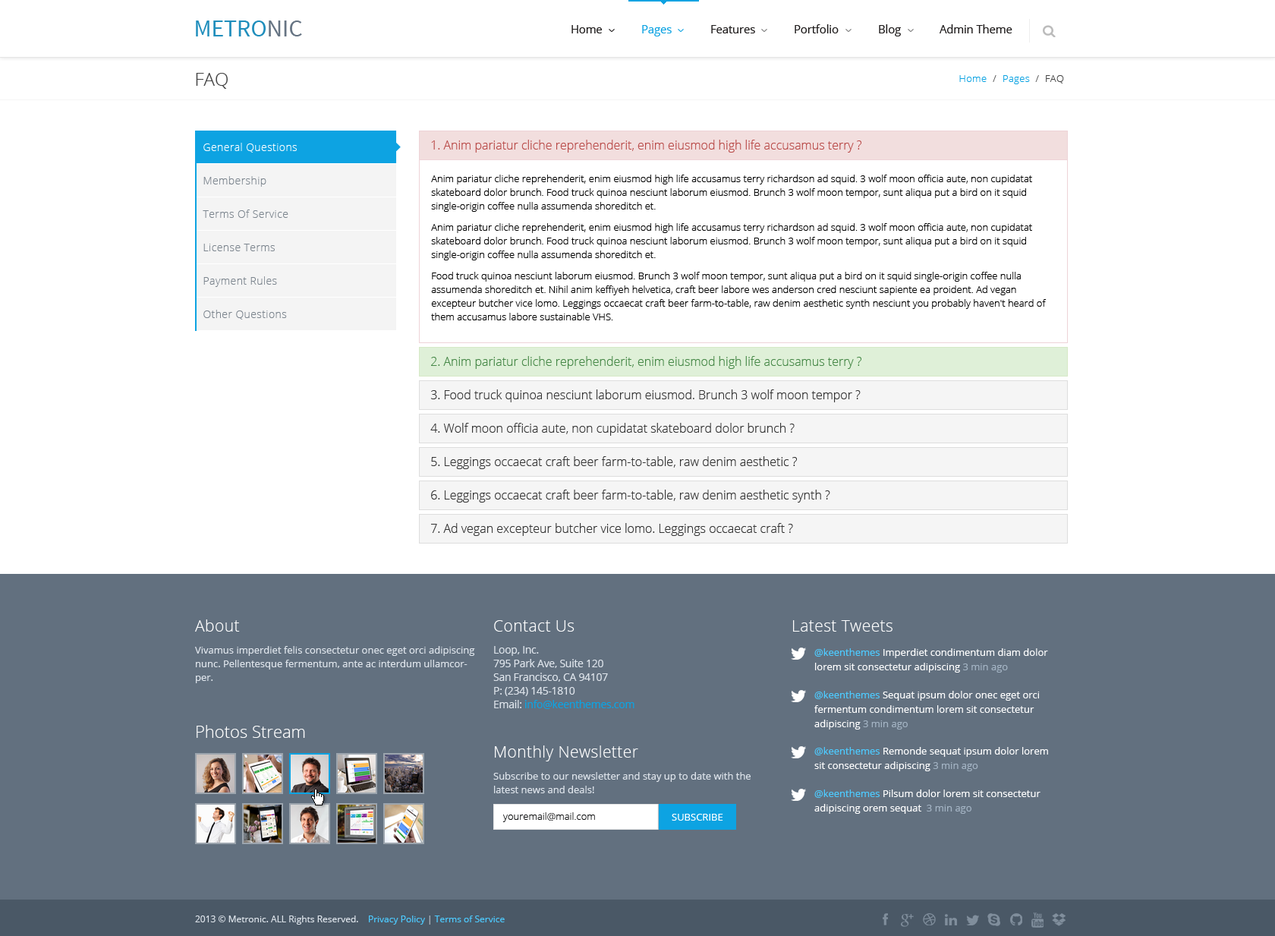
<style>
.page{position:relative;width:1275px;height:936px;background:#ffffff}
.page>*{position:absolute;margin:0}
.t1{font:24.2px "SourceSansPro-Regular";color:#208ebc;text-transform:uppercase}
.t2{font:24.2px "SourceSansPro-Regular";color:#667483;text-transform:uppercase}
.t3{font:11.1px "OpenSans";color:#1f1c1c}
.t4{font:11.1px "OpenSans";color:#0da3e2}
.t5{font:18.2px "OpenSans-Light";color:#444444}
.t6{font:9.9px "OpenSans-Light";letter-spacing:0.025em;color:#444444}
.t7{font:9.9px "OpenSans-Light";letter-spacing:0.025em;color:#0da3e2}
.t8{font:10.6px "OpenSans-Light";letter-spacing:0.03em;color:#ffffff}
.t9{font:12.1px "OpenSans-Light";color:#b94a48}
.t10{font:10.6px "OpenSans-Light";letter-spacing:0.03em;color:#7c858e}
.t11{font:9.9px/13.7px "OpenSans-Light";color:#000000}
.t12{font:9.9px/7.6px "OpenSans-Light";color:#000000}
.t13{font:12.1px "OpenSans-Light";color:#468847}
.t14{font:12.1px "OpenSans-Light";color:#333333}
.t15{font:15.9px "OpenSans-Light";letter-spacing:0.02em;color:#fefefe}
.t16{font:15.9px "OpenSans-Light";letter-spacing:0.02em;color:#ffffff}
.t17{font:9.9px/13.7px "OpenSans";color:#dee4eb}
.t18{font:10.6px/13.7px "OpenSans";letter-spacing:-0.02em;color:#dee4eb}
.t19{font:10.6px/13.7px "OpenSans";letter-spacing:-0.02em;color:#0da3e2}
.t20{font:9.9px/14.4px "OpenSans";color:#ffffff}
.t21{font:9.9px/14.4px "OpenSans";color:#4dcaff}
.t22{font:9.9px/14.4px "OpenSans";color:#a3b3c3}
.t23{font:16.7px "OpenSans-Light";color:#fefefe}
.t24{font:9.9px "OpenSans-Light";color:#121314}
.t25{font:9.9px "OpenSans";color:#ffffff}
.t26{font:9.1px "OpenSans";color:#dee4eb}
.t27{font:9.1px "OpenSans";color:#4dcaff}
.t28{font:9.1px "OpenSans";color:#b5bdc7}
</style>
<div class="page">
<p class="t1" style="left:196px;top:20px;width:106px;height:16px">Metro<span class="t2">nic</span></p>
<p class="t3" style="left:571px;top:25px;width:31px;height:8px">Home</p>
<p class="t4" style="left:642px;top:25px;width:29px;height:11px">Pages</p>
<p class="t3" style="left:711px;top:25px;width:44px;height:8px">Features</p>
<p class="t3" style="left:794px;top:24px;width:44px;height:9px">Portfolio</p>
<p class="t3" style="left:879px;top:24px;width:22px;height:12px">Blog</p>
<p class="t3" style="left:939px;top:24px;width:73px;height:9px">Admin Theme</p>
<p class="t5" style="left:196px;top:73px;width:32px;height:16px">FAQ</p>
<p class="t6" style="left:959px;top:75px;width:105px;height:9px"><span class="t7">Home  </span>/  <span class="t7">Pages</span>  /  FAQ</p>
<p class="t8" style="left:203px;top:143px;width:94px;height:10px">General Questions</p>
<p class="t9" style="left:431px;top:140px;width:430px;height:13px">1. Anim pariatur cliche reprehenderit, enim eiusmod high life accusamus terry ?</p>
<p class="t10" style="left:203px;top:176px;width:63px;height:11px">Membership</p>
<p class="t11" style="left:431px;top:175px;width:615px;height:145px">Anim pariatur cliche reprehenderit, enim eiusmod high life accusamus terry richardson ad squid. 3 wolf moon officia aute, non cupidatat skateboard dolor brunch. Food truck quinoa nesciunt laborum eiusmod. Brunch 3 wolf moon tempor, sunt aliqua put a bird on it squid single-origin coffee nulla assumenda shoreditch et.<br><br><span class="t12">Anim pariatur cliche reprehenderit, enim eiusmod high life accusamus terry richardson ad squid. 3 wolf moon officia aute, non cupidatat </span>skateboard dolor brunch. Food truck quinoa nesciunt laborum eiusmod. Brunch 3 wolf moon tempor, sunt aliqua put a bird on it squid single-origin coffee nulla assumenda shoreditch et.<br><br><span class="t12">Food truck quinoa nesciunt laborum eiusmod. Brunch 3 wolf moon tempor, sunt aliqua put a bird on it squid single-origin coffee nulla </span>assumenda shoreditch et. Nihil anim keffiyeh helvetica, craft beer labore wes anderson cred nesciunt sapiente ea proident. Ad vegan excepteur butcher vice lomo. Leggings occaecat craft beer farm-to-table, raw denim aesthetic synth nesciunt you probably haven't heard of them accusamus labore sustainable VHS.</p>
<p class="t10" style="left:203px;top:209px;width:85px;height:9px">Terms Of Service</p>
<p class="t10" style="left:203px;top:244px;width:72px;height:7px">License Terms</p>
<p class="t10" style="left:203px;top:276px;width:74px;height:11px">Payment Rules</p>
<p class="t10" style="left:203px;top:310px;width:84px;height:9px">Other Questions</p>
<p class="t13" style="left:431px;top:356px;width:430px;height:13px">2. Anim pariatur cliche reprehenderit, enim eiusmod high life accusamus terry ?</p>
<p class="t14" style="left:430px;top:389px;width:430px;height:13px">3. Food truck quinoa nesciunt laborum eiusmod. Brunch 3 wolf moon tempor ?</p>
<p class="t14" style="left:430px;top:423px;width:364px;height:13px">4. Wolf moon officia aute, non cupidatat skateboard dolor brunch ?</p>
<p class="t14" style="left:431px;top:456px;width:366px;height:13px">5. Leggings occaecat craft beer farm-to-table, raw denim aesthetic ?</p>
<p class="t14" style="left:431px;top:489px;width:399px;height:13px">6. Leggings occaecat craft beer farm-to-table, raw denim aesthetic synth ?</p>
<p class="t14" style="left:431px;top:523px;width:362px;height:13px">7. Ad vegan excepteur butcher vice lomo. Leggings occaecat craft ?</p>
<p class="t15" style="left:195px;top:619px;width:45px;height:12px">About</p>
<p class="t16" style="left:494px;top:620px;width:80px;height:11px">Contact Us</p>
<p class="t16" style="left:793px;top:620px;width:99px;height:11px">Latest Tweets</p>
<p class="t17" style="left:195px;top:646px;width:280px;height:37px">Vivamus imperdiet felis consectetur onec eget orci adipiscing nunc. Pellentesque fermentum, ante ac interdum ullamcorper.</p>
<p class="t18" style="left:493px;top:646px;width:141px;height:63px">Loop, Inc. <br>795 Park Ave, Suite 120 <br>San Francisco, CA 94107 <br>P: (234) 145-1810 <br>Email: <span class="t19">info@keenthemes.com</span></p>
<p class="t20" style="left:814px;top:648px;width:234px;height:24px"><span class="t21">@keenthemes </span>Imperdiet condimentum diam dolor lorem sit consectetur adipiscing<span class="t22"> 3 min ago</span></p>
<p class="t20" style="left:814px;top:690px;width:225px;height:39px"><span class="t21">@keenthemes </span>Sequat ipsum dolor onec eget orci fermentum condimentum lorem sit consectetur adipiscing<span class="t22"> 3 min ago</span></p>
<p class="t23" style="left:197px;top:725px;width:108px;height:12px">Photos Stream</p>
<p class="t16" style="left:495px;top:745px;width:143px;height:16px">Monthly Newsletter</p>
<p class="t20" style="left:814px;top:747px;width:234px;height:24px"><span class="t21">@keenthemes </span>Remonde sequat ipsum dolor lorem sit consectetur adipiscing<span class="t22"> 3 min ago</span></p>
<p class="t17" style="left:493px;top:772px;width:257px;height:21px">Subscribe to our newsletter and stay up to date with the latest news and deals!</p>
<p class="t20" style="left:814px;top:789px;width:226px;height:24px"><span class="t21">@keenthemes </span>Pilsum dolor lorem sit consectetur adipiscing orem sequat <span class="t22"> 3 min ago</span></p>
<p class="t24" style="left:502px;top:812px;width:93px;height:10px">youremail@mail.com</p>
<p class="t25" style="left:671px;top:813px;width:52px;height:7px">SUBSCRIBE</p>
<p class="t26" style="left:195px;top:915px;width:310px;height:9px">2013 © Metronic. ALL Rights Reserved.    <span class="t27">Privacy Policy </span><span class="t28">|</span><span class="t27"> Terms of Service</span></p>
</div>
